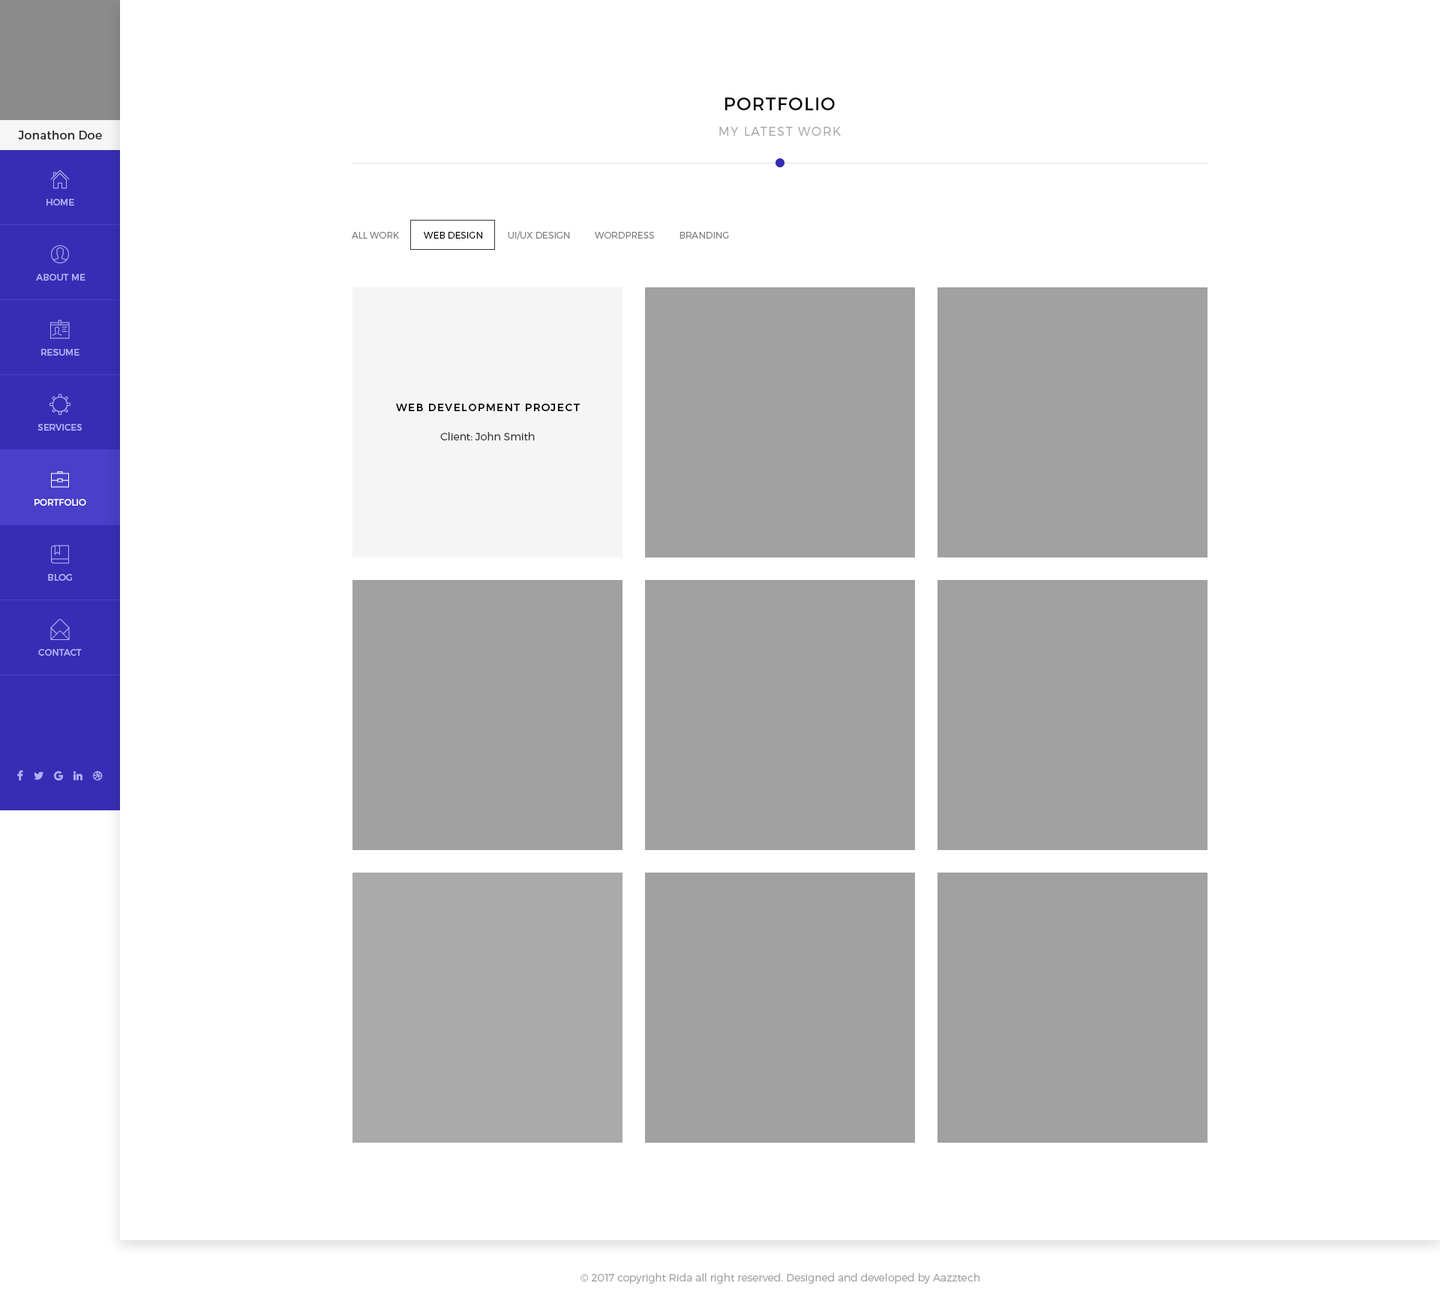
<style>
.page{position:relative;width:1440px;height:1316px;background:#ffffff}
.page>*{position:absolute;margin:0}
.t1{font:18px "Montserrat-Regular";letter-spacing:0.05em;color:#000000;text-transform:uppercase}
.t2{font:12px "Montserrat-Regular";color:#2a2a2a}
.t3{font:12px "Montserrat-Light";letter-spacing:0.1em;color:#a8a8a8;text-transform:uppercase}
.t4{font:9px "Montserrat-Regular";color:#b5b0f7;text-transform:uppercase}
.t5{font:9px "Montserrat-Light";color:#7d7d7d;text-transform:uppercase}
.t6{font:9px "Montserrat-Light";color:#000000;text-transform:uppercase}
.t7{font:10.5px "Montserrat-Regular";letter-spacing:0.1em;color:#000000;text-transform:uppercase}
.t8{font:10.5px "Montserrat-Light";color:#2f2f2f}
.t9{font:9px "Montserrat-Regular";color:#ffffff;text-transform:uppercase}
.t10{font:10.5px "Montserrat-Light";color:#9f9f9f}
</style>
<div class="page">
<p class="t1" style="left:725px;top:98px;width:110px;height:12px">portfolio</p>
<p class="t2" style="left:18px;top:130px;width:84px;height:10px">Jonathon Doe</p>
<p class="t3" style="left:719px;top:127px;width:122px;height:9px">my latest work</p>
<p class="t4" style="left:46px;top:199px;width:28px;height:7px">HOME</p>
<p class="t5" style="left:352px;top:231px;width:377px;height:9px">All Work          <span class="t6">web design          </span>UI/UX design          wordpress          branding</p>
<p class="t4" style="left:36px;top:274px;width:50px;height:6px">about me</p>
<p class="t4" style="left:41px;top:349px;width:39px;height:7px">resume</p>
<p class="t7" style="left:396px;top:404px;width:184px;height:7px">Web development project</p>
<p class="t4" style="left:38px;top:424px;width:44px;height:6px">services</p>
<p class="t8" style="left:440px;top:432px;width:95px;height:8px">Client: John Smith</p>
<p class="t9" style="left:34px;top:499px;width:52px;height:7px">portfolio</p>
<p class="t4" style="left:48px;top:574px;width:24px;height:6px">blog</p>
<p class="t4" style="left:38px;top:649px;width:44px;height:7px">contact</p>
<p class="t10" style="left:580px;top:1273px;width:400px;height:10px">© 2017 copyright Rida all right reserved. Designed and developed by Aazztech</p>
</div>
